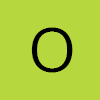
<style>
.page{position:relative;width:100px;height:100px;background:#b7d73e}
.page>*{position:absolute;margin:0}
.t1{font:62.5px "Muli-Regular";color:#000000}
</style>
<div class="page">
<p class="t1" style="left:31px;top:27px;width:42px;height:46px">O</p>
</div>
